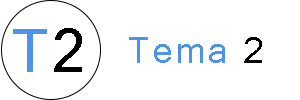
<style>
.page{position:relative;width:300px;height:100px;background:#ffffff}
.page>*{position:absolute;margin:0}
.t1{font:60px "MicrosoftSansSerif";letter-spacing:0.075em;color:#4d93e9}
.t2{font:60px "MicrosoftSansSerif";letter-spacing:0.075em;color:#000000}
.t3{font:36px "MicrosoftSansSerif";letter-spacing:0.075em;color:#4d93e9}
.t4{font:36px "MicrosoftSansSerif";letter-spacing:0.075em;color:#000000}
</style>
<div class="page">
<p class="t1" style="left:13px;top:28px;width:69px;height:44px">T<span class="t2">2</span></p>
<p class="t3" style="left:129px;top:37px;width:133px;height:26px">Tema<span class="t4"> 2</span></p>
</div>
